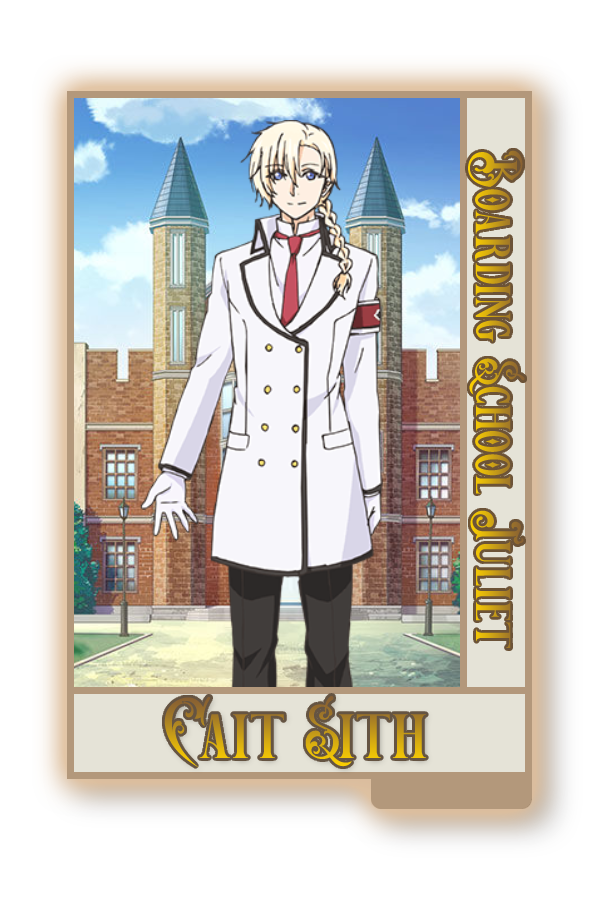
<style>
.page{position:relative;width:600px;height:900px;background:#ffffff}
.page>*{position:absolute;margin:0}
.t1{font:58.9px "VictorianDecadeDemoVersion"}
.t2{font:75px "VictorianDecadeDemoVersion"}
</style>
<div class="page">
<p class="t1" style="left:468px;top:150px;width:57px;height:498px;rotate:90deg">Boarding School Juliet</p>
<p class="t2" style="left:161px;top:695px;width:266px;height:73px">Cait Sith</p>
</div>
